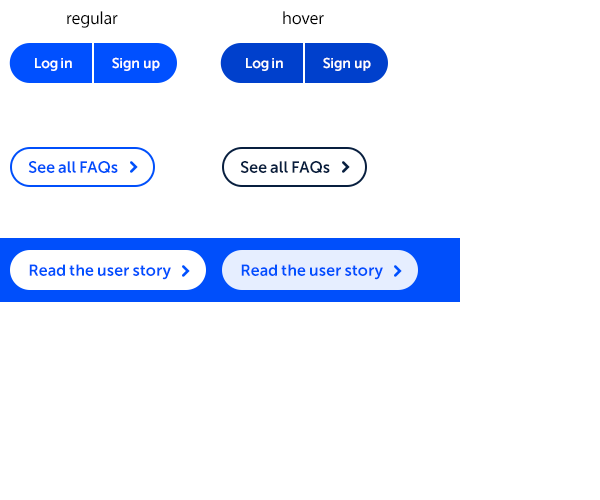
<style>
.page{position:relative;width:600px;height:500px;background:#ffffff}
.page>*{position:absolute;margin:0}
.t1{font:18px "MyriadPro-Regular";letter-spacing:-0.015em;color:#000000}
.t2{font:14px "MuseoSans-700";letter-spacing:-0.015em;color:#ffffff}
.t3{font:14px "MuseoSans-700";letter-spacing:-0.01em;color:#ffffff}
.t4{font:16.1px "MuseoSans-700";letter-spacing:0.005em;color:#004ffb}
.t5{font:16.1px "MuseoSans-700";letter-spacing:0.005em;color:#081f3f}
.t6{font:16px "MuseoSans-700";letter-spacing:0.005em;color:#0050ff}
</style>
<div class="page">
<p class="t1" style="left:67px;top:11px;width:51px;height:17px">regular</p>
<p class="t1" style="left:283px;top:11px;width:41px;height:14px">hover</p>
<p class="t2" style="left:35px;top:58px;width:37px;height:13px">Log in</p>
<p class="t3" style="left:112px;top:57px;width:48px;height:14px">Sign up</p>
<p class="t2" style="left:246px;top:58px;width:37px;height:13px">Log in</p>
<p class="t3" style="left:323px;top:57px;width:48px;height:14px">Sign up</p>
<p class="t4" style="left:28px;top:161px;width:90px;height:12px">See all FAQs</p>
<p class="t5" style="left:240px;top:161px;width:90px;height:12px">See all FAQs</p>
<p class="t6" style="left:29px;top:264px;width:142px;height:16px">Read the user story</p>
<p class="t6" style="left:241px;top:264px;width:142px;height:16px">Read the user story</p>
</div>
